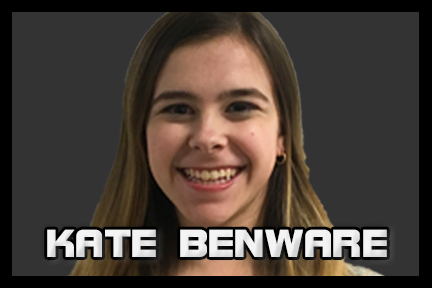
<style>
.page{position:relative;width:432px;height:288px;background:#333333}
.page>*{position:absolute;margin:0}
.t1{font:41.7px "BolsterBold";color:#f3f3f3}
</style>
<div class="page">
<p class="t1" style="left:47px;top:229px;width:340px;height:28px">KATE BENWARE</p>
</div>
